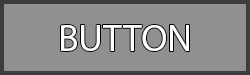
<style>
.page{position:relative;width:250px;height:75px;background:#909090}
.page>*{position:absolute;margin:0}
.t1{font:38px "MyriadPro-Regular";color:#ffffff}
</style>
<div class="page">
<p class="t1" style="left:61px;top:25px;width:128px;height:26px">BUTTON</p>
</div>
